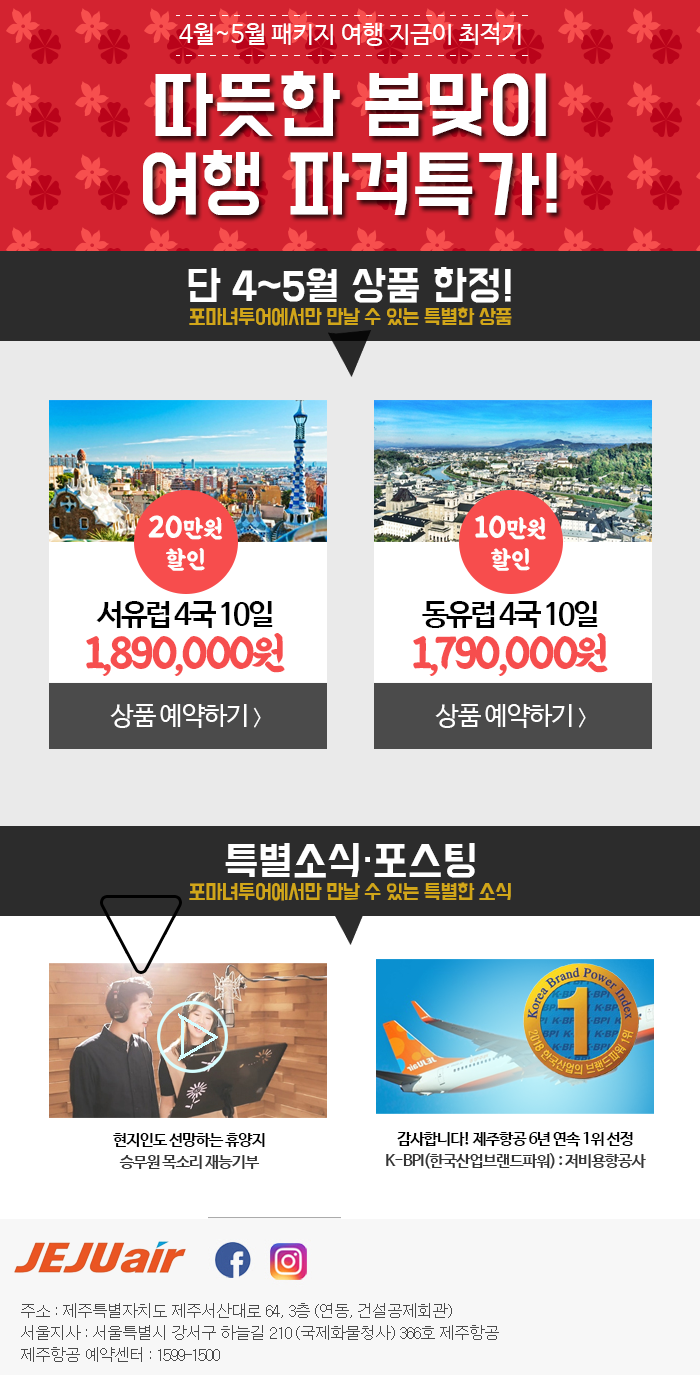
<style>
.page{position:relative;width:700px;height:1375px;background:#ffffff}
.page>*{position:absolute;margin:0}
.t1{font:24px "NanumBarunGothic";color:#ffffff}
.t2{font:66px "BMDoHyeon";color:#ffffff}
.t3{font:18px/26px "BMDoHyeon";letter-spacing:-0.04em;color:#d1a619}
.t4{font:36px "BMDoHyeon";color:#ffffff}
.t5{font:25.4px "BMEULJIROTTF";color:#fefefd}
.t6{font:29.9px "BMEULJIROTTF";color:#fefefd}
.t7{font:30px/2px "NanumBarunGothicBold";letter-spacing:-0.08em;color:#000000}
.t8{font:44px/42px "BMEULJIROTTF";letter-spacing:-0.08em;color:#f64e4e}
.t9{font:26px "NanumBarunGothic";letter-spacing:-0.04em;color:#ffffff}
.t10{font:21.3px "NanumBarunGothic";letter-spacing:-0.04em;color:#ffffff}
.t11{font:16px/2px "NanumBarunGothicBold";letter-spacing:-0.06em;color:#000000}
.t12{font:16px/22px "NanumBarunGothicBold";letter-spacing:-0.06em;color:#353535}
.t13{font:16px/22px "Dotum";letter-spacing:-0.06em;color:#4b4b4b}
</style>
<div class="page">
<p class="t1" style="left:179px;top:22px;width:342px;height:24px">4월~5월 패키지 여행 지금이 최적기</p>
<p class="t2" style="left:143px;top:71px;width:414px;height:144px;text-align:center">따뜻한 봄맞이<br>여행 파격특가!</p>
<p class="t3" style="left:188px;top:267px;width:324px;height:59px;text-align:center"><span class="t4">단 4~5월 상품 한정!<br></span>포마녀투어에서만 만날 수 있는 특별한 상품</p>
<p class="t5" style="left:148px;top:515px;width:75px;height:56px;text-align:center"><span class="t6">20</span>만원<br>할인</p>
<p class="t5" style="left:475px;top:515px;width:71px;height:56px;text-align:center"><span class="t6">10</span>만원<br>할인</p>
<p class="t7" style="left:86px;top:601px;width:199px;height:75px;text-align:center">서유럽 4국 10일<br><span class="t8">1,890,000원</span></p>
<p class="t7" style="left:413px;top:601px;width:195px;height:75px;text-align:center">동유럽 4국 10일<br><span class="t8">1,790,000원</span></p>
<p class="t9" style="left:110px;top:704px;width:151px;height:24px">상품 예약하기 <span class="t10">〉</span></p>
<p class="t9" style="left:435px;top:704px;width:151px;height:24px">상품 예약하기 <span class="t10">〉</span></p>
<p class="t3" style="left:189px;top:843px;width:322px;height:58px;text-align:center"><span class="t4">특별소식·포스팅<br></span>포마녀투어에서만 만날 수 있는 특별한 소식</p>
<p class="t11" style="left:113px;top:1133px;width:152px;height:36px;text-align:center">현지인도 선망하는 휴양지<br><span class="t12">승무원 목소리 재능기부</span></p>
<p class="t12" style="left:386px;top:1132px;width:260px;height:37px;text-align:center"><span class="t11">감사합니다! 제주항공 6년 연속 1위 선정<br></span>K-BPI(한국산업브랜드파워) : 저비용항공사</p>
<p class="t13" style="left:21px;top:1303px;width:478px;height:59px">주소 : 제주특별자치도 제주서산대로 64, 3층 (연동, 건설공제회관)<br>서울지사 : 서울특별시 강서구 하늘길 210 (국제화물청사) 366호 제주항공<br>제주항공 예약센터 : 1599-1500</p>
</div>
